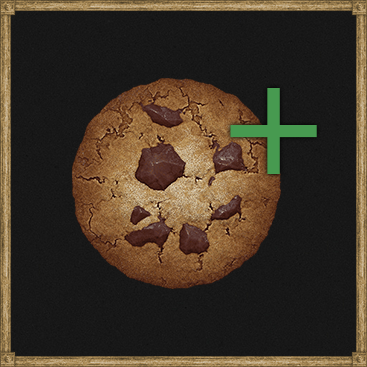
<style>
.page{position:relative;width:367px;height:367px}
.page>*{position:absolute;margin:0}
.t1{font:150px "Tahoma";color:#479a50}
</style>
<div class="page">
<p class="t1" style="left:230px;top:88px;width:87px;height:86px">+</p>
</div>
